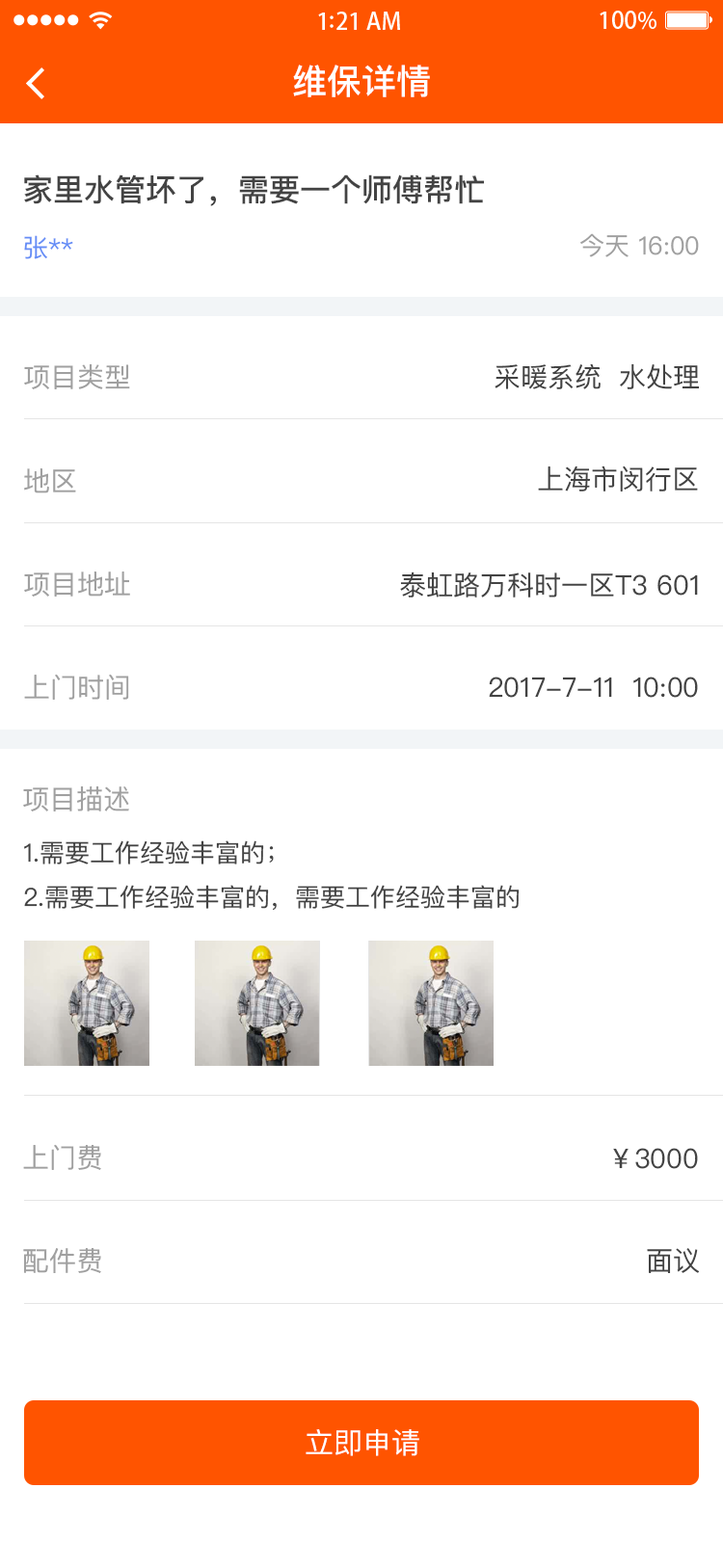
<style>
.page{position:relative;width:723px;height:1568px;background:#ffffff}
.page>*{position:absolute;margin:0}
.t1{font:34.7px "PingFangSC-Medium";color:#ffffff}
.t2{font:30.8px "PingFangSC-Medium";color:#434343}
.t3{font:25.1px "PingFangSC-Regular";color:#a0a0a0}
.t4{font:25.1px "PingFangSC-Regular";color:#648df6}
.t5{font:27px "PingFangSC-Regular";color:#a0a0a0}
.t6{font:27px "PingFangSC-Regular";color:#434343}
.t7{font:25.1px/48.2px "PingFangSC-Regular";color:#434343}
.t8{font:28.9px "PingFangSC-Regular";color:#ffffff;text-transform:uppercase}
</style>
<div class="page">
<p class="t1" style="left:293px;top:65px;width:137px;height:32px">维保详情</p>
<p class="t2" style="left:24px;top:174px;width:460px;height:32px">家里水管坏了，需要一个师傅帮忙</p>
<p class="t3" style="left:580px;top:233px;width:119px;height:24px">今天 16:00</p>
<p class="t4" style="left:24px;top:235px;width:49px;height:24px">张**</p>
<p class="t5" style="left:24px;top:364px;width:106px;height:25px">项目类型</p>
<p class="t6" style="left:494px;top:363px;width:205px;height:26px">采暖系统  水处理</p>
<p class="t5" style="left:24px;top:468px;width:52px;height:25px">地区</p>
<p class="t6" style="left:538px;top:465px;width:160px;height:27px">上海市闵行区</p>
<p class="t5" style="left:24px;top:571px;width:106px;height:26px">项目地址</p>
<p class="t6" style="left:400px;top:571px;width:298px;height:27px">泰虹路万科时一区T3 601</p>
<p class="t5" style="left:24px;top:674px;width:105px;height:26px">上门时间</p>
<p class="t6" style="left:489px;top:677px;width:209px;height:21px">2017-7-11  10:00</p>
<p class="t5" style="left:23px;top:786px;width:106px;height:25px">项目描述</p>
<p class="t7" style="left:24px;top:840px;width:495px;height:71px">1.需要工作经验丰富的；<br>2.需要工作经验丰富的，需要工作经验丰富的</p>
<p class="t5" style="left:23px;top:1144px;width:78px;height:26px">上门费</p>
<p class="t6" style="left:613px;top:1148px;width:85px;height:21px">￥3000</p>
<p class="t5" style="left:23px;top:1248px;width:78px;height:25px">配件费</p>
<p class="t6" style="left:647px;top:1248px;width:53px;height:25px">面议</p>
<p class="t8" style="left:306px;top:1429px;width:113px;height:27px">立即申请</p>
</div>
